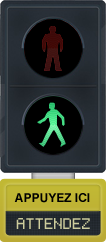
<style>
.page{position:relative;width:106px;height:242px}
.page>*{position:absolute;margin:0}
.t1{font:12px "Arial-BoldMT";color:#000000}
.t2{font:14px "VolterGoldfish";color:#cdcc9c}
</style>
<div class="page">
<p class="t1" style="left:14px;top:193px;width:76px;height:10px">APPUYEZ ICI</p>
<p class="t2" style="left:16px;top:218px;width:74px;height:11px">ATTENDEZ</p>
</div>
